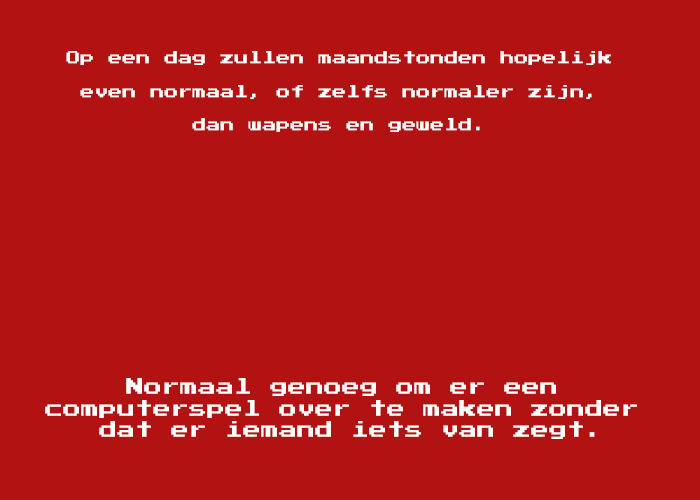
<style>
.page{position:relative;width:700px;height:500px;background:#b21212}
.page>*{position:absolute;margin:0}
.t1{font:14px "PressStart2P";color:#ffffff}
.t2{font:18px "PressStart2P";color:#ffffff}
</style>
<div class="page">
<p class="t1" style="left:66px;top:51px;width:545px;height:81px;text-align:center">Op een dag zullen maandstonden hopelijk<br> <br>even normaal, of zelfs normaler zijn,<br><br>dan wapens en geweld.</p>
<p class="t2" style="left:45px;top:378px;width:592px;height:61px;text-align:center">Normaal genoeg om er een <br>computerspel over te maken zonder <br>dat er iemand iets van zegt.</p>
</div>
